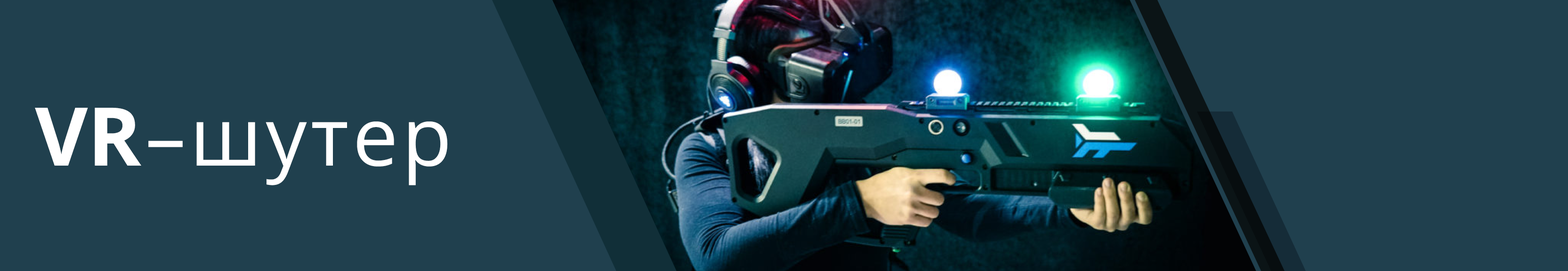
<style>
.page{position:relative;width:1568px;height:271px;background:#20404e}
.page>*{position:absolute;margin:0}
.t1{font:81px "OpenSans";letter-spacing:0.05em;color:#ffffff}
.t2{font:81px "OpenSans-Bold";color:#ffffff}
.t3{font:81px "OpenSans-Bold";letter-spacing:0.05em;color:#ffffff}
</style>
<div class="page">
<p class="t1" style="left:35px;top:108px;width:412px;height:78px"><span class="t2">V</span><span class="t3">R</span>–шутер</p>
</div>
